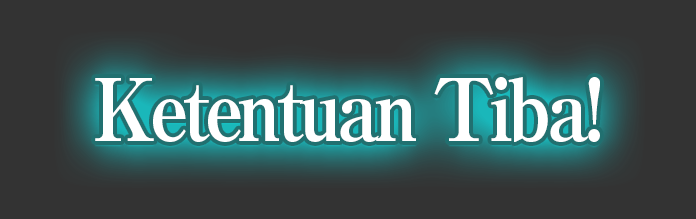
<style>
.page{position:relative;width:696px;height:219px;background:#333333}
.page>*{position:absolute;margin:0}
.t1{font:86px "RyuminPro-ExBold";letter-spacing:-0.08em;color:#ffffff;scale:0.9 1}
</style>
<div class="page">
<p class="t1" style="left:95px;top:77px;width:505px;height:65px">Ketentuan Tiba!</p>
</div>
